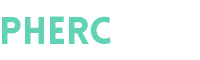
<style>
.page{position:relative;width:200px;height:60px;background:#ffffff}
.page>*{position:absolute;margin:0}
.t1{font:38px "LoveloBlack";color:#61d2b4}
</style>
<div class="page">
<p class="t1" style="left:2px;top:16px;width:109px;height:28px">PHERC</p>
</div>
